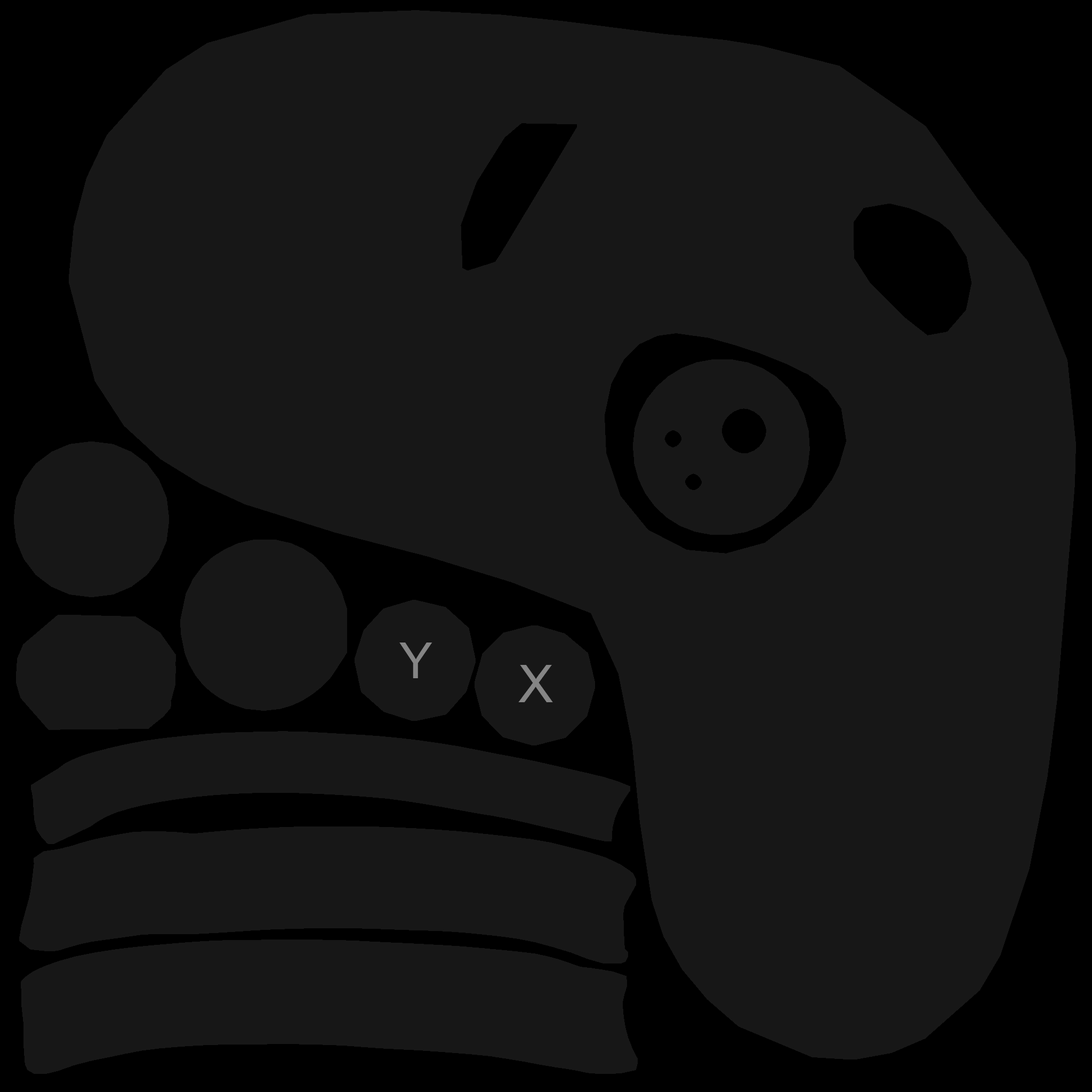
<style>
.page{position:relative;width:1092px;height:1092px;background:#171717}
.page>*{position:absolute;margin:0}
.t1{font:49.8px "ArialMT";color:#858585}
.t2{font:52.4px "ArialMT";color:#858585}
</style>
<div class="page">
<p class="t1" style="left:399px;top:643px;width:33px;height:35px">Y</p>
<p class="t2" style="left:518px;top:665px;width:35px;height:37px">X</p>
</div>
